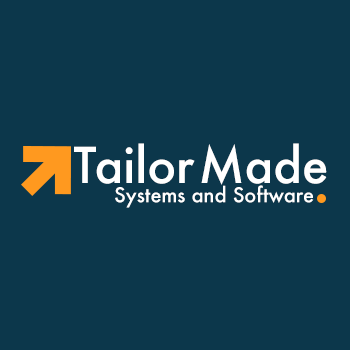
<style>
.page{position:relative;width:350px;height:350px;background:#0c374b}
.page>*{position:absolute;margin:0}
.t1{font:48px "Futura-Medium";color:#ffffff}
.t2{font:20px "Futura-Medium";color:#ffffff}
</style>
<div class="page">
<p class="t1" style="left:74px;top:143px;width:121px;height:41px">Tailor</p>
<p class="t1" style="left:201px;top:143px;width:126px;height:42px">Made</p>
<p class="t2" style="left:115px;top:185px;width:199px;height:23px">Systems and Software</p>
</div>
